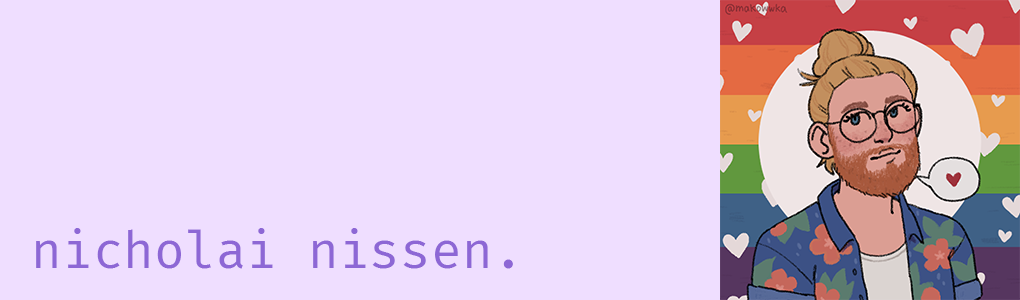
<style>
.page{position:relative;width:1020px;height:300px;background:#efdeff}
.page>*{position:absolute;margin:0}
.t1{font:50px "FiraCode-Regular";color:#8d67d5}
</style>
<div class="page">
<p class="t1" style="left:36px;top:228px;width:477px;height:41px">nicholai nissen.</p>
</div>
